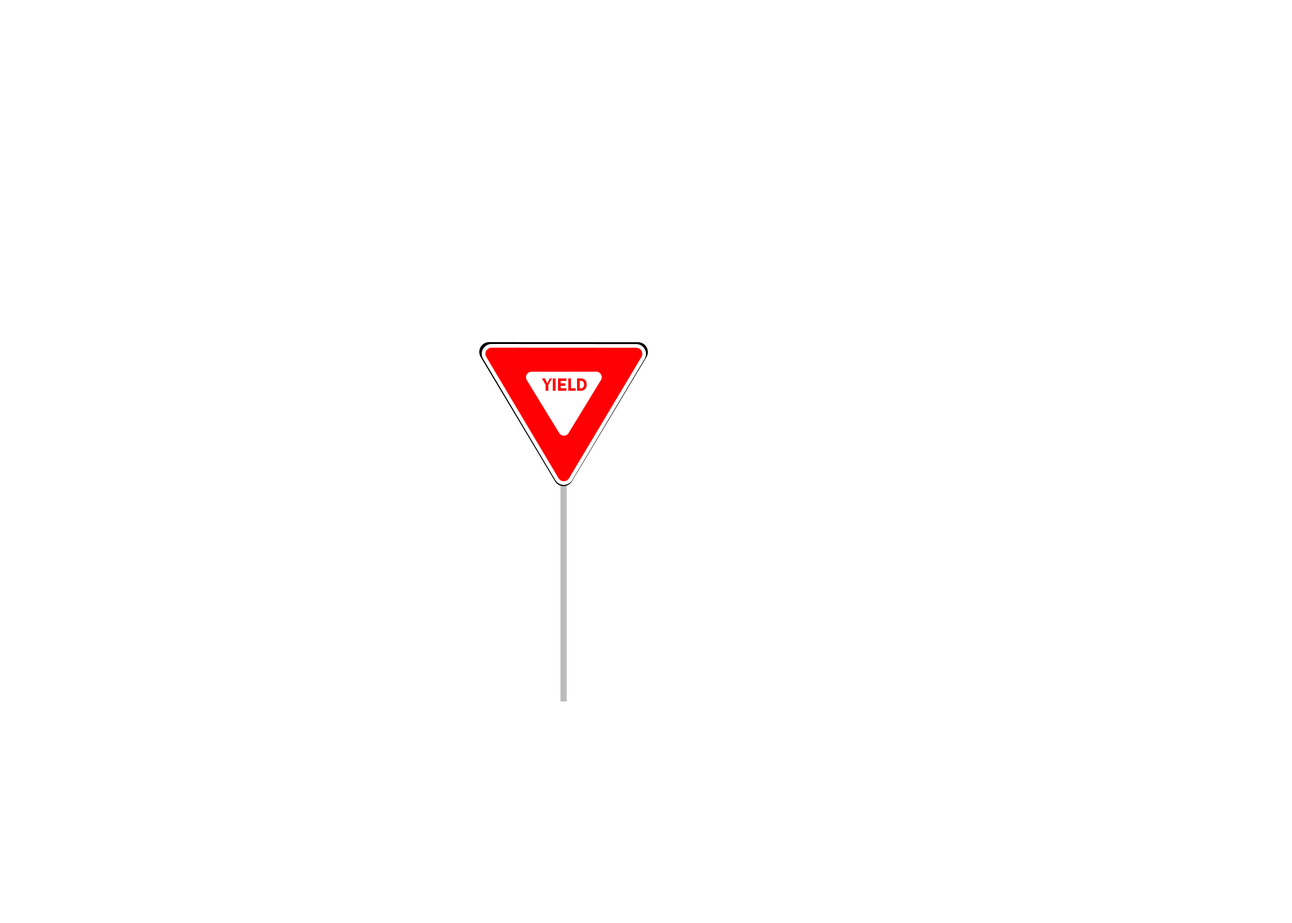
<style>
.page{position:relative;width:1292px;height:923px;background:#ffffff}
.page>*{position:absolute;margin:0}
.t1{font:17.9px "FranklinGothic-Demi";color:#ff0004}
</style>
<div class="page">
<p class="t1" style="left:541px;top:378px;width:46px;height:13px">YIELD</p>
</div>
